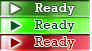
<style>
.page{position:relative;width:92px;height:51px}
.page>*{position:absolute;margin:0}
.t1{font:13.3px "Rockwell";letter-spacing:0.025em;color:#ffffff}
.t2{font:13.3px "Rockwell";letter-spacing:0.025em;color:#00561f}
.t3{font:13.3px "Rockwell";letter-spacing:0.025em;color:#990000}
</style>
<div class="page">
<p class="t1" style="left:35px;top:3px;width:40px;height:12px">Ready</p>
<p class="t2" style="left:35px;top:20px;width:40px;height:12px">Ready</p>
<p class="t3" style="left:35px;top:37px;width:40px;height:12px">Ready</p>
</div>
